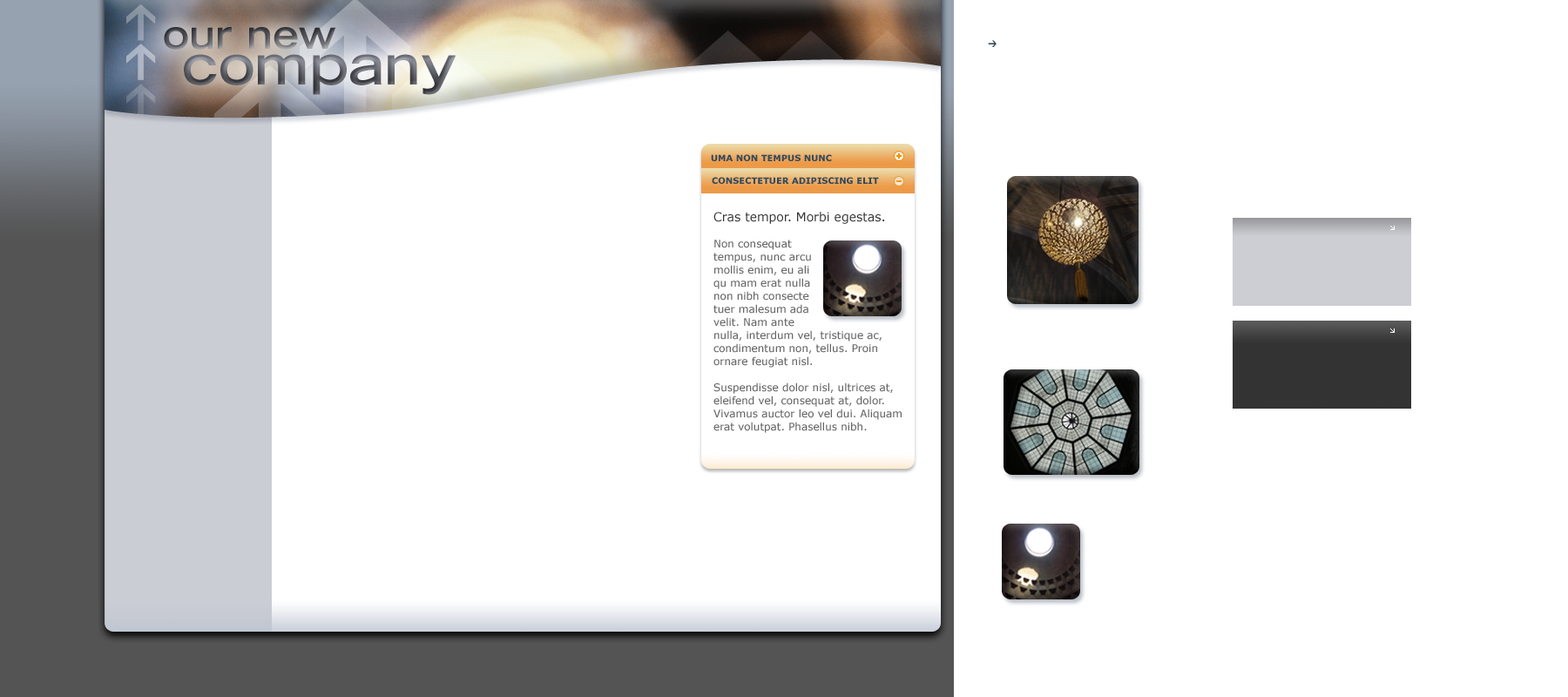
<style>
.page{position:relative;width:1568px;height:697px;background:#ffffff}
.page>*{position:absolute;margin:0}
.t1{font:39.2px "TradeGothicLH-BoldExtended"}
.t2{font:54.3px "TradeGothicLH-BoldExtended"}
.t3{font:8.7px "Verdana-Bold";color:#33495d;text-transform:uppercase}
.t4{font:10.5px/13.1px "Verdana";color:#666666}
.t5{font:12.2px/13.1px "Verdana";color:#333333}
</style>
<div class="page">
<p class="t1" style="left:164px;top:27px;width:172px;height:23px">our new</p>
<p class="t2" style="left:184px;top:54px;width:272px;height:41px">company</p>
<p class="t3" style="left:711px;top:154px;width:121px;height:7px">Uma non tempus nunc</p>
<p class="t3" style="left:712px;top:177px;width:167px;height:7px">Consectetuer adipiscing elit</p>
<p class="t4" style="left:713px;top:212px;width:189px;height:221px"><span class="t5">Cras tempor. Morbi egestas. <br></span><br>Non consequat<br>tempus, nunc arcu <br>mollis enim, eu ali<br>qu mam erat nulla<br>non nibh consecte<br>tuer malesum ada<br>velit. Nam ante <br>nulla, interdum vel, tristique ac, condimentum non, tellus. Proin ornare feugiat nisl. <br><br>Suspendisse dolor nisl, ultrices at, eleifend vel, consequat at, dolor. Vivamus auctor leo vel dui. Aliquam erat volutpat. Phasellus nibh.</p>
</div>
